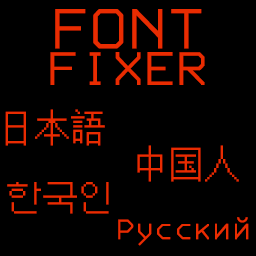
<style>
.page{position:relative;width:256px;height:256px;background:#000000}
.page>*{position:absolute;margin:0}
.t1{font:72px "3270-Regular";color:#e92c01}
.t2{font:60px "3270-Regular";color:#e92c01}
.t3{font:36px "Unifont";color:#e92c01}
.t4{font:36px "3270-Regular";color:#e92c01}
</style>
<div class="page">
<p class="t1" style="left:55px;top:9px;width:147px;height:40px">FONT</p>
<p class="t2" style="left:50px;top:52px;width:155px;height:33px">FIXER</p>
<p class="t3" style="left:5px;top:109px;width:100px;height:37px">日本語</p>
<p class="t3" style="left:137px;top:145px;width:102px;height:37px">中国人</p>
<p class="t3" style="left:7px;top:182px;width:102px;height:32px">한국인</p>
<p class="t4" style="left:118px;top:217px;width:131px;height:29px">Русский</p>
</div>
